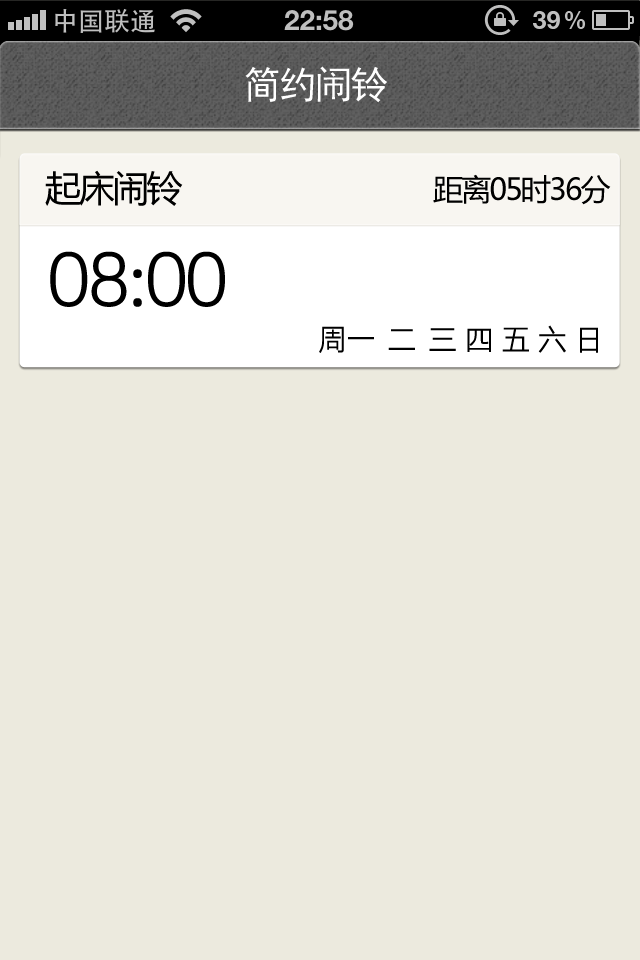
<style>
.page{position:relative;width:640px;height:960px;background:#eceade}
.page>*{position:absolute;margin:0}
.t1{font:38px "SimHei";letter-spacing:-0.06em;color:#ffffff}
.t2{font:36px "MicrosoftYaHei";letter-spacing:-0.06em;color:#000000}
.t3{font:30px "MicrosoftYaHei";letter-spacing:-0.06em;color:#000000}
.t4{font:72px "STHeitiSC-Light";letter-spacing:-0.06em;color:#000000}
.t5{font:30px "STHeitiSC-Light";letter-spacing:-0.06em;color:#000000}
</style>
<div class="page">
<p class="t1" style="left:245px;top:66px;width:142px;height:37px">简约闹铃</p>
<p class="t2" style="left:45px;top:170px;width:138px;height:36px">起床闹铃</p>
<p class="t3" style="left:433px;top:174px;width:178px;height:31px">距离05时36分</p>
<p class="t4" style="left:50px;top:251px;width:175px;height:56px">08:00</p>
<p class="t5" style="left:319px;top:325px;width:279px;height:28px">周一   二   三  四  五  六  日</p>
</div>
